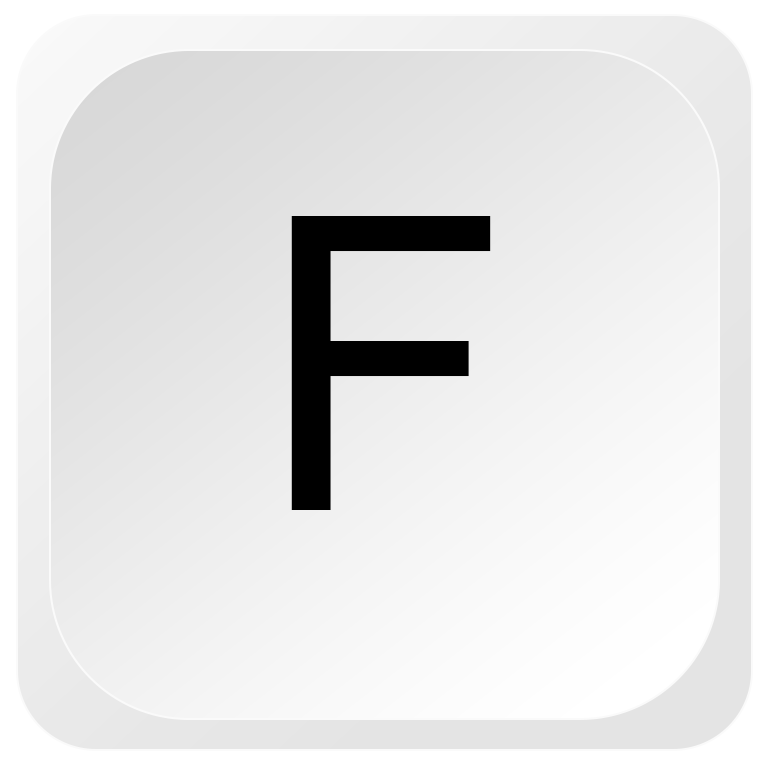
<style>
.page{position:relative;width:768px;height:768px}
.page>*{position:absolute;margin:0}
.t1{font:411px "ArialMT";color:#000000}
</style>
<div class="page">
<p class="t1" style="left:291px;top:216px;width:200px;height:294px">F</p>
</div>
